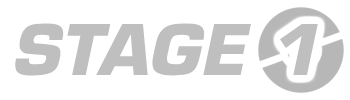
<style>
.page{position:relative;width:350px;height:100px;background:#ffffff}
.page>*{position:absolute;margin:0}
.t1{font:68px "Eurostile-BoldOblique";color:#bfbfbf}
</style>
<div class="page">
<p class="t1" style="left:15px;top:23px;width:303px;height:53px">STAGE 1</p>
</div>
